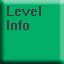
<style>
.page{position:relative;width:64px;height:64px;background:#00ae68}
.page>*{position:absolute;margin:0}
.t1{font:12px "System";color:#404040}
</style>
<div class="page">
<p class="t1" style="left:7px;top:6px;width:34px;height:24px">Level<br>Info</p>
</div>
